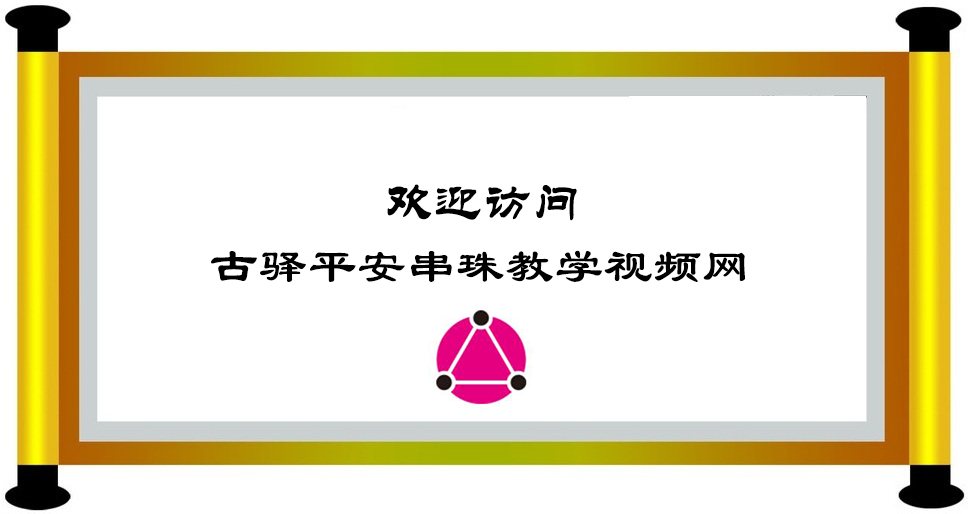
<style>
.page{position:relative;width:977px;height:514px;background:#ffffff}
.page>*{position:absolute;margin:0}
.t1{font:48px "STLiti";color:#000000;font-weight:bold}
.t2{font:48px "LiSu";color:#000000;font-weight:bold}
</style>
<div class="page">
<p class="t1" style="left:387px;top:184px;width:190px;height:37px">欢迎访问</p>
<p class="t2" style="left:211px;top:250px;width:534px;height:32px">古驿平安串珠教学视频网</p>
</div>
